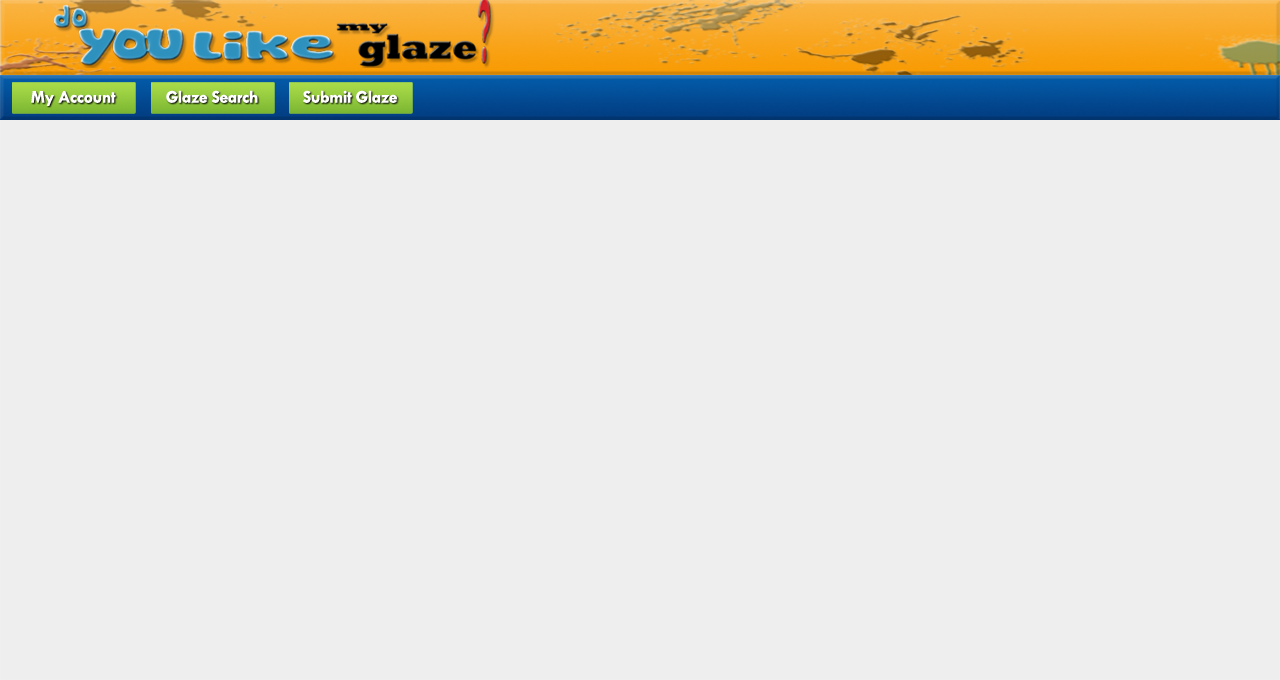
<style>
.page{position:relative;width:1280px;height:680px;background:#eeeeee}
.page>*{position:absolute;margin:0}
.t1{font:18px "TwCenMT-Bold";letter-spacing:-0.025em;color:#ffffff}
</style>
<div class="page">
<p class="t1" style="left:31px;top:91px;width:85px;height:15px">My Account</p>
<p class="t1" style="left:166px;top:90px;width:92px;height:13px">Glaze Search</p>
<p class="t1" style="left:303px;top:90px;width:95px;height:13px">Submit Glaze</p>
</div>
